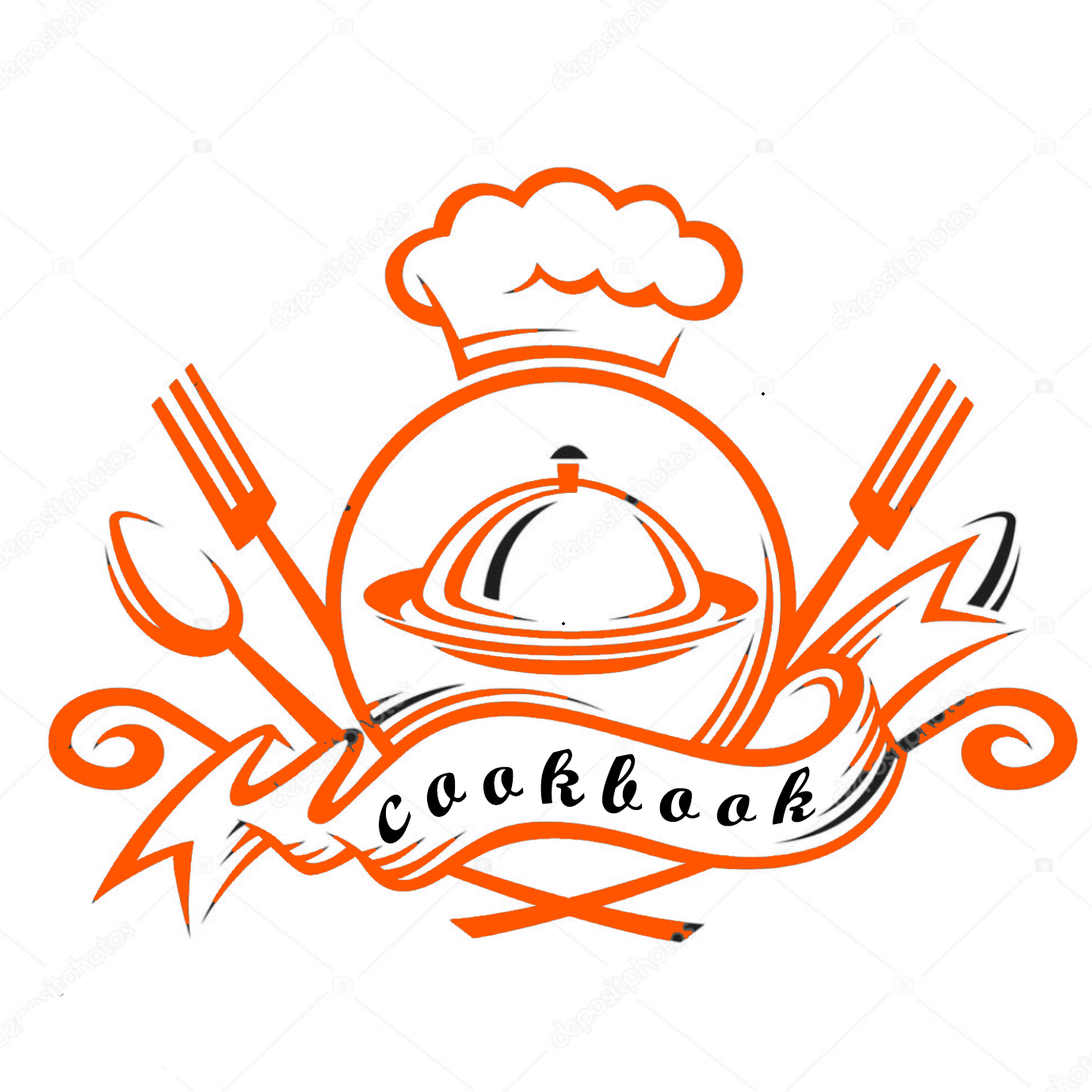
<style>
.page{position:relative;width:1092px;height:1092px;background:#ffffff}
.page>*{position:absolute;margin:0}
.t1{font:88px "ScriptMTBold";letter-spacing:0.2em;color:#000000}
</style>
<div class="page">
<p class="t1" style="left:379px;top:749px;width:436px;height:95px;rotate:-5deg">cookbook</p>
</div>
